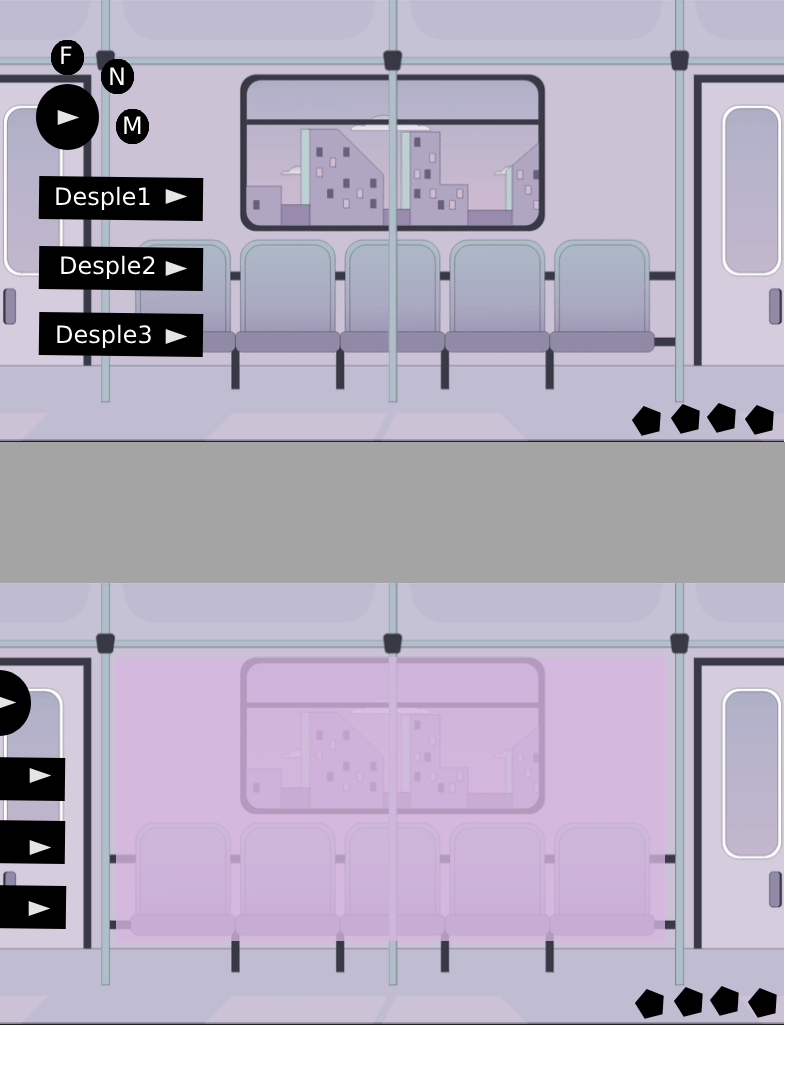
<style>
.page{position:relative;width:785px;height:1075px}
.page>*{position:absolute;margin:0}
.t1{font:24px "DejaVuSans";color:#ffffff}
</style>
<div class="page">
<p class="t1" style="left:61px;top:46px;width:11px;height:18px">F</p>
<p class="t1" style="left:110px;top:67px;width:14px;height:18px">N</p>
<p class="t1" style="left:124px;top:116px;width:17px;height:18px">M</p>
<p class="t1" style="left:56px;top:186px;width:94px;height:24px">Desple1</p>
<p class="t1" style="left:61px;top:255px;width:94px;height:24px">Desple2</p>
<p class="t1" style="left:57px;top:324px;width:94px;height:24px">Desple3</p>
</div>
